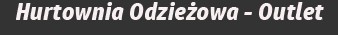
<style>
.page{position:relative;width:338px;height:35px;background:#333333}
.page>*{position:absolute;margin:0}
.t1{font:24px "HPSimplified-BoldItalic";color:#f8eff0}
</style>
<div class="page">
<p class="t1" style="left:16px;top:2px;width:308px;height:18px">Hurtownia Odzieżowa - Outlet</p>
</div>
